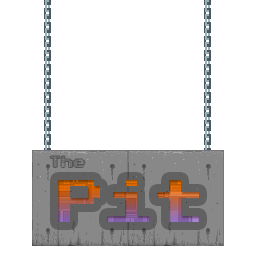
<style>
.page{position:relative;width:256px;height:256px;background:#ffffff}
.page>*{position:absolute;margin:0}
.t1{font:48px "PublicPixel";letter-spacing:0.025em}
</style>
<div class="page">
<p class="t1" style="left:58px;top:180px;width:141px;height:42px">Pit</p>
</div>
